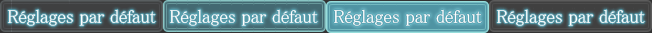
<style>
.page{position:relative;width:652px;height:33px}
.page>*{position:absolute;margin:0}
.t1{font:18.7px "MS-PMincho";color:#ffffff}
</style>
<div class="page">
<p class="t1" style="left:8px;top:9px;width:148px;height:17px">Réglages par défaut</p>
<p class="t1" style="left:170px;top:9px;width:148px;height:17px">Réglages par défaut</p>
<p class="t1" style="left:334px;top:9px;width:148px;height:17px">Réglages par défaut</p>
<p class="t1" style="left:497px;top:9px;width:148px;height:17px">Réglages par défaut</p>
</div>
